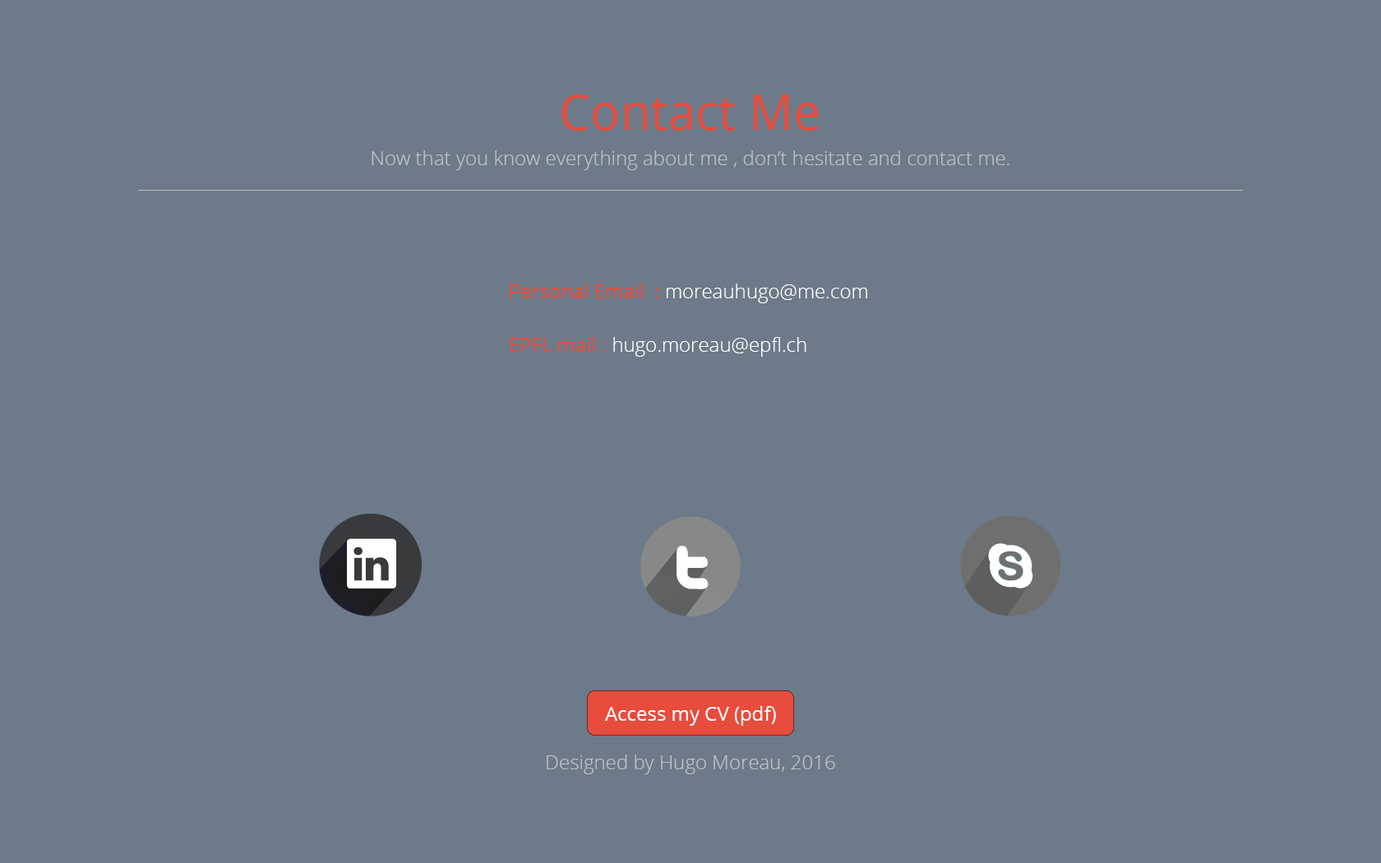
<style>
.page{position:relative;width:1381px;height:863px;background:#6c7a89}
.page>*{position:absolute;margin:0}
.t1{font:49.3px "OpenSans";color:#e74c3c}
.t2{font:19.7px "OpenSans-Light";color:#bdc3c7}
.t3{font:19.7px "OpenSans";color:#e74c3c}
.t4{font:19.7px "OpenSans-Light";color:#ffffff}
.t5{font:19.7px "OpenSans";color:#ffffff}
</style>
<div class="page">
<p class="t1" style="left:562px;top:95px;width:257px;height:36px">Contact Me</p>
<p class="t2" style="left:372px;top:150px;width:638px;height:20px">Now that you know everything about me , don’t hesitate and contact me.</p>
<p class="t3" style="left:510px;top:284px;width:357px;height:19px">Personal Email  : <span class="t4">moreauhugo@me.com</span></p>
<p class="t4" style="left:511px;top:337px;width:296px;height:20px"><span class="t3">EPFL mail : </span>hugo.moreau@epfl.ch</p>
<p class="t5" style="left:605px;top:706px;width:171px;height:20px">Access my CV (pdf)</p>
<p class="t2" style="left:547px;top:755px;width:288px;height:19px">Designed by Hugo Moreau, 2016</p>
</div>
